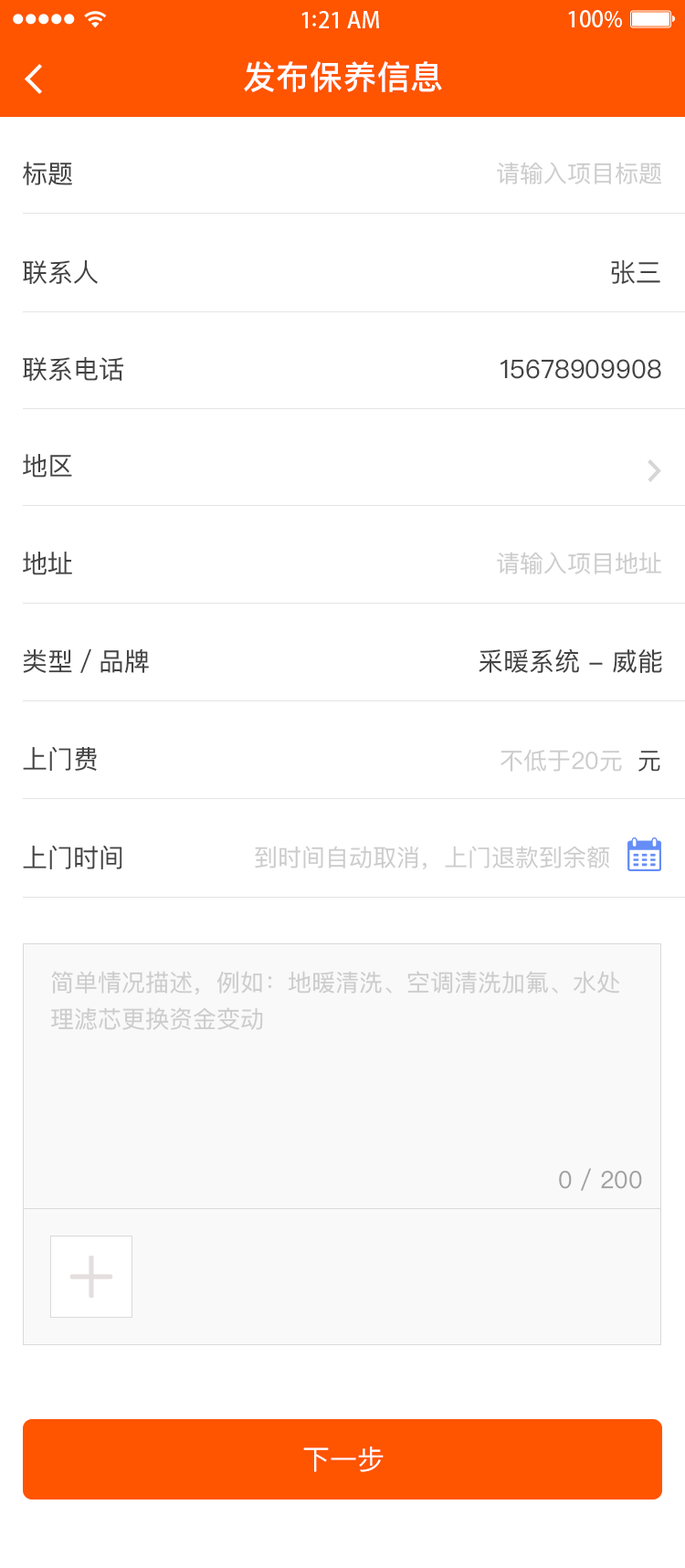
<style>
.page{position:relative;width:685px;height:1568px;background:#ffffff}
.page>*{position:absolute;margin:0}
.t1{font:32.9px "PingFangSC-Medium";letter-spacing:0.02em;color:#ffffff}
.t2{font:25.6px "PingFangSC-Regular";color:#434343}
.t3{font:23.7px "PingFangSC-Regular";color:#cccccc}
.t4{font:23.7px "PingFangSC-Regular";color:#434343}
.t5{font:23.7px/40.2px "PingFangSC-Regular";color:#cccccc}
.t6{font:23.7px "PingFangSC-Regular";color:#a0a0a0}
.t7{font:27.4px "PingFangSC-Regular";color:#ffffff;text-transform:uppercase}
</style>
<div class="page">
<p class="t1" style="left:244px;top:61px;width:198px;height:31px">发布保养信息</p>
<p class="t2" style="left:23px;top:162px;width:49px;height:23px">标题</p>
<p class="t3" style="left:497px;top:162px;width:164px;height:22px">请输入项目标题</p>
<p class="t2" style="left:23px;top:260px;width:75px;height:25px">联系人</p>
<p class="t2" style="left:611px;top:260px;width:49px;height:24px">张三</p>
<p class="t2" style="left:23px;top:357px;width:101px;height:25px">联系电话</p>
<p class="t2" style="left:500px;top:359px;width:161px;height:20px">15678909908</p>
<p class="t2" style="left:23px;top:454px;width:49px;height:24px">地区</p>
<p class="t2" style="left:23px;top:552px;width:49px;height:23px">地址</p>
<p class="t3" style="left:497px;top:552px;width:164px;height:22px">请输入项目地址</p>
<p class="t2" style="left:23px;top:648px;width:126px;height:25px">类型／品牌</p>
<p class="t2" style="left:479px;top:648px;width:183px;height:25px">采暖系统 - 威能</p>
<p class="t2" style="left:23px;top:746px;width:74px;height:25px">上门费</p>
<p class="t3" style="left:500px;top:749px;width:122px;height:23px">不低于20元</p>
<p class="t4" style="left:638px;top:751px;width:22px;height:21px">元</p>
<p class="t2" style="left:23px;top:845px;width:99px;height:24px">上门时间</p>
<p class="t3" style="left:255px;top:846px;width:355px;height:24px">到时间自动取消，上门退款到余额</p>
<p class="t5" style="left:51px;top:971px;width:568px;height:59px">简单情况描述，例如：地暖清洗、空调清洗加氟、水处<br>理滤芯更换资金变动</p>
<p class="t6" style="left:559px;top:1168px;width:83px;height:23px">0 / 200</p>
<p class="t7" style="left:303px;top:1447px;width:81px;height:25px">下一步</p>
</div>
